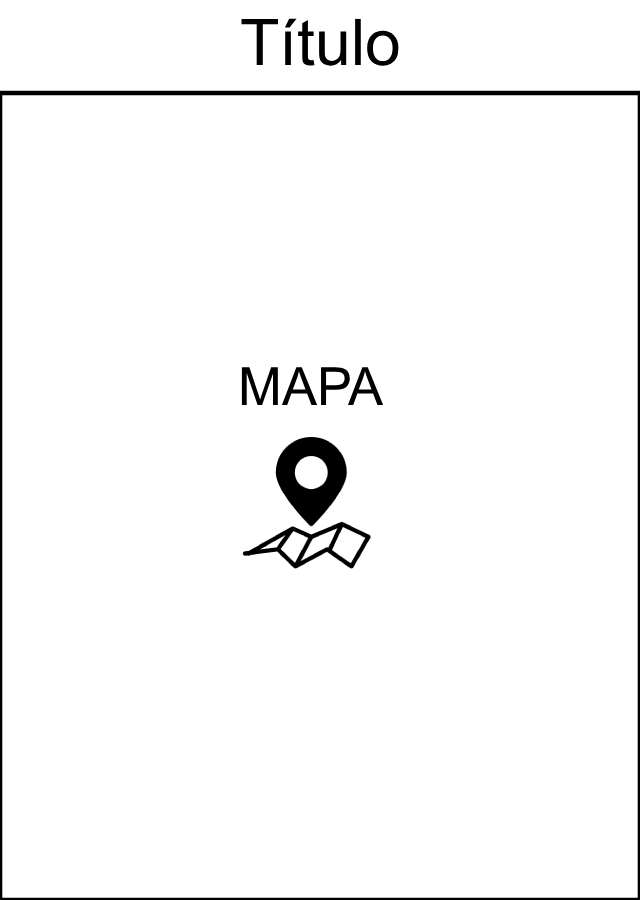
<style>
.page{position:relative;width:640px;height:900px;background:#ffffff}
.page>*{position:absolute;margin:0}
.t1{font:64.4px "ArialMT";color:#000000}
.t2{font:52.6px "ArialMT";color:#000000}
</style>
<div class="page">
<p class="t1" style="left:241px;top:18px;width:158px;height:48px">Título</p>
<p class="t2" style="left:241px;top:367px;width:143px;height:38px">MAPA</p>
</div>
